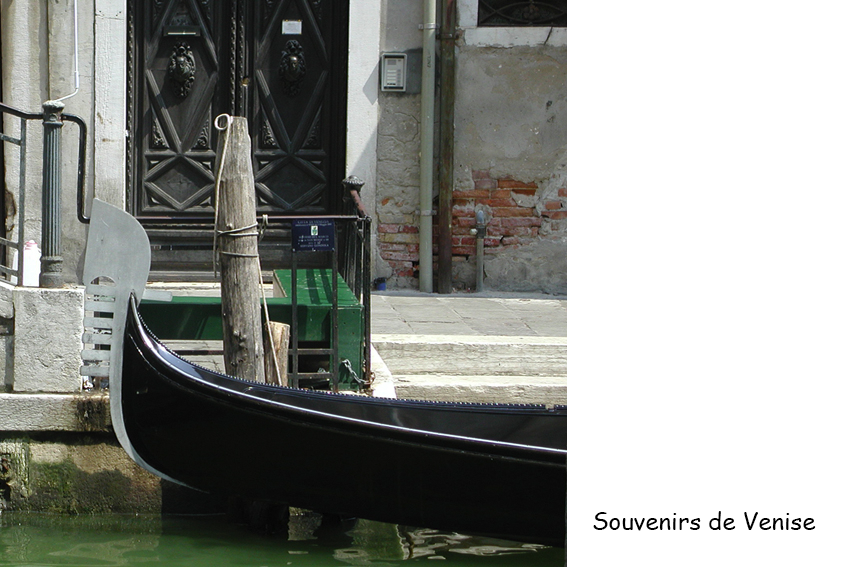
<style>
.page{position:relative;width:849px;height:567px;background:#ffffff}
.page>*{position:absolute;margin:0}
.t1{font:24px "ComicSansMS";color:#000000}
</style>
<div class="page">
<p class="t1" style="left:593px;top:511px;width:223px;height:20px">Souvenirs de Venise</p>
</div>
